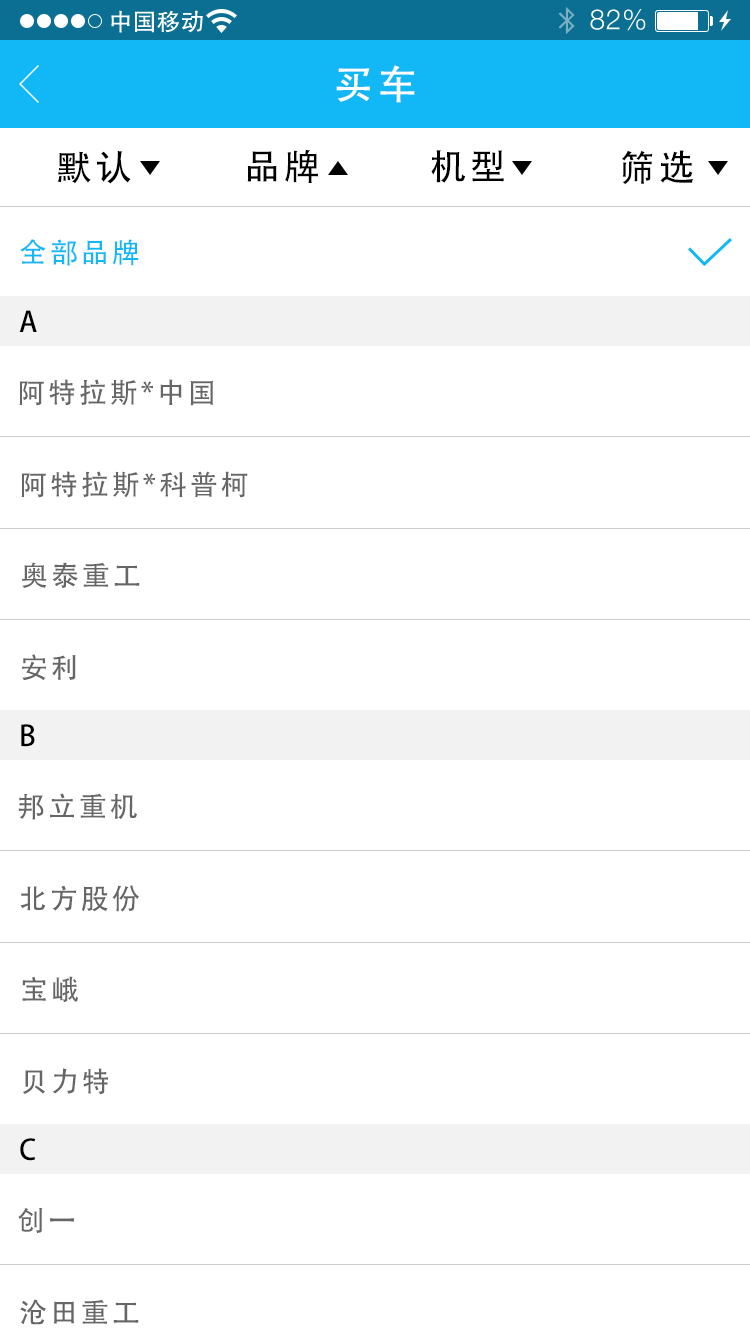
<style>
.page{position:relative;width:750px;height:1334px;background:#ffffff}
.page>*{position:absolute;margin:0}
.t1{font:40px "AdobeHeitiStd-Regular";letter-spacing:0.104em;color:#ffffff}
.t2{font:36px "AdobeHeitiStd-Regular";letter-spacing:0.104em;color:#000000}
.t3{font:28px "AdobeHeitiStd-Regular";letter-spacing:0.104em;color:#12b8f6}
.t4{font:28px "AdobeHeitiStd-Regular";letter-spacing:0.104em;color:#000000}
.t5{font:28px "AdobeHeitiStd-Regular";letter-spacing:0.104em;color:#666666}
</style>
<div class="page">
<p class="t1" style="left:336px;top:65px;width:79px;height:38px">买车</p>
<p class="t2" style="left:247px;top:149px;width:71px;height:34px">品牌</p>
<p class="t2" style="left:431px;top:150px;width:73px;height:33px">机型</p>
<p class="t2" style="left:621px;top:150px;width:73px;height:35px">筛选</p>
<p class="t2" style="left:57px;top:151px;width:74px;height:33px">默认</p>
<p class="t3" style="left:20px;top:239px;width:119px;height:27px">全部品牌</p>
<p class="t4" style="left:19px;top:310px;width:18px;height:22px">A</p>
<p class="t5" style="left:19px;top:379px;width:194px;height:27px">阿特拉斯*中国</p>
<p class="t5" style="left:21px;top:471px;width:227px;height:27px">阿特拉斯*科普柯</p>
<p class="t5" style="left:22px;top:562px;width:118px;height:26px">奥泰重工</p>
<p class="t5" style="left:22px;top:654px;width:54px;height:27px">安利</p>
<p class="t4" style="left:21px;top:724px;width:14px;height:23px">B</p>
<p class="t5" style="left:18px;top:793px;width:119px;height:27px">邦立重机</p>
<p class="t5" style="left:20px;top:885px;width:120px;height:27px">北方股份</p>
<p class="t5" style="left:22px;top:976px;width:56px;height:26px">宝峨</p>
<p class="t5" style="left:22px;top:1068px;width:86px;height:27px">贝力特</p>
<p class="t4" style="left:20px;top:1138px;width:16px;height:23px">C</p>
<p class="t5" style="left:18px;top:1207px;width:56px;height:26px">创一</p>
<p class="t5" style="left:20px;top:1299px;width:119px;height:26px">沧田重工</p>
</div>
